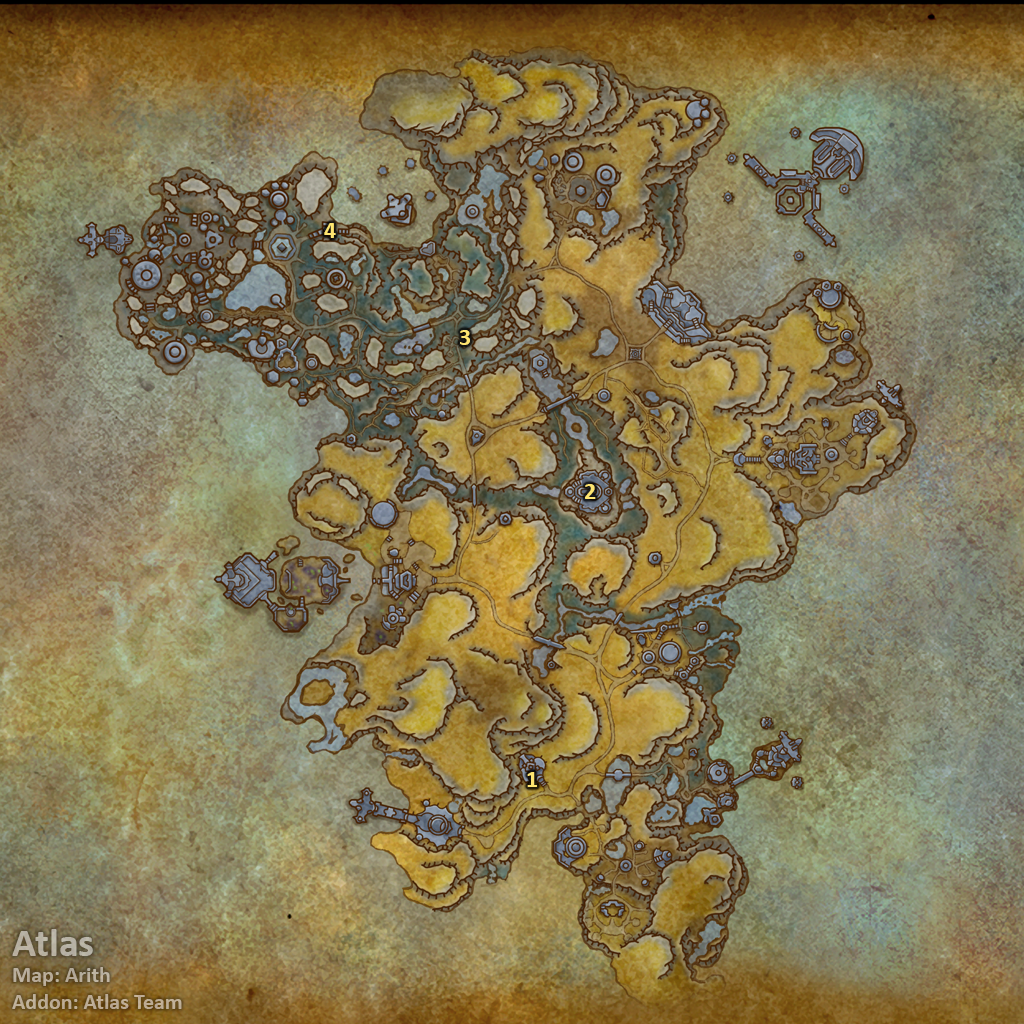
<style>
.page{position:relative;width:1024px;height:1024px}
.page>*{position:absolute;margin:0}
.t1{font:24px "Calibri-Bold";color:#fee570}
.t2{font:22px "Calibri-Bold";color:#b9af9d}
.t3{font:40px "Calibri-Bold";color:#b9af9d}
</style>
<div class="page">
<p class="t1" style="left:324px;top:223px;width:12px;height:15px">4</p>
<p class="t1" style="left:460px;top:330px;width:10px;height:15px">3</p>
<p class="t1" style="left:585px;top:484px;width:11px;height:15px">2</p>
<p class="t1" style="left:527px;top:772px;width:10px;height:15px">1</p>
<p class="t2" style="left:12px;top:929px;width:170px;height:80px"><span class="t3">Atlas<br></span>Map: Arith<br>Addon: Atlas Team</p>
</div>
